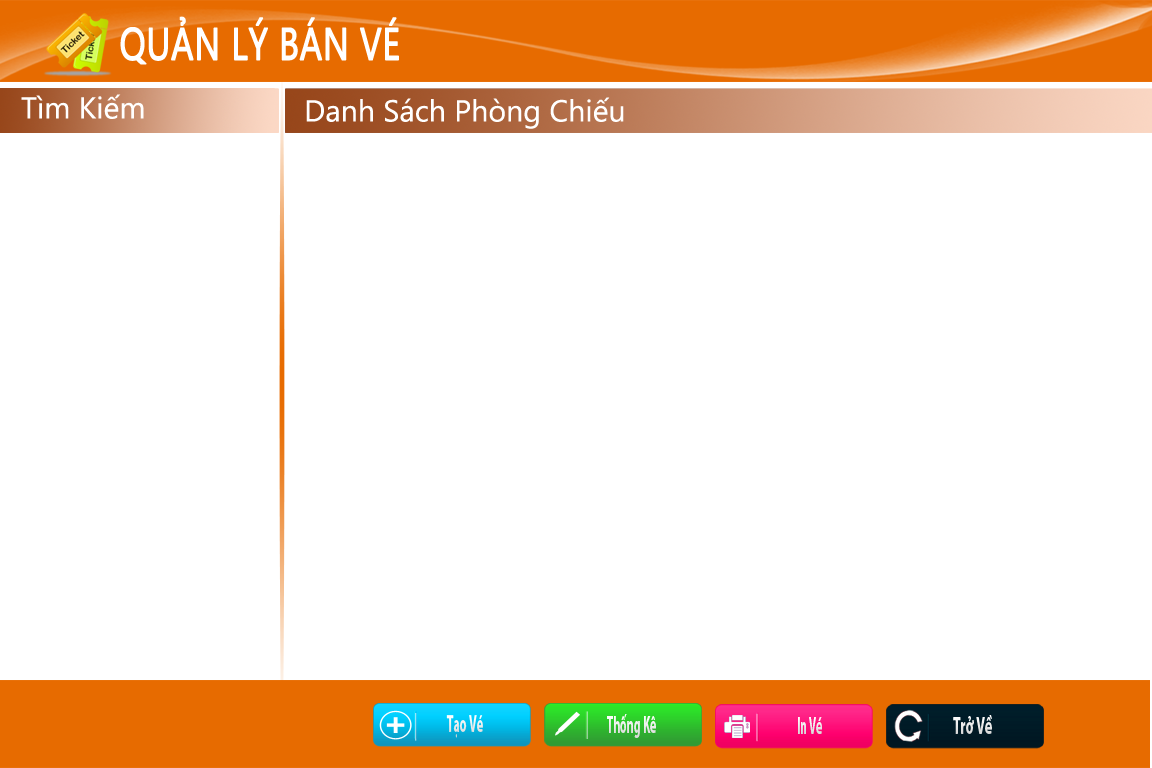
<style>
.page{position:relative;width:1152px;height:768px;background:#ffffff}
.page>*{position:absolute;margin:0}
.t1{font:45px "SegoeUI";color:#ffffff;text-transform:uppercase;font-weight:bold;scale:0.77 1}
.t2{font:30.3px "SegoeUI";color:#ffffff}
.t3{font:23.9px "MyriadPro-Bold";color:#ffffff;scale:0.5 1}
.t4{font:23.9px "MyriadPro-Bold";color:#ffffff;scale:0.49 1}
.t5{font:23.9px "MyriadPro-Bold";color:#e7e7e7;scale:0.47 1}
.t6{font:24.2px "MyriadPro-Bold";color:#e9e9e9;scale:0.57 1}
</style>
<div class="page">
<p class="t1" style="left:120px;top:16px;width:279px;height:49px">QUẢN LÝ BÁN VÉ</p>
<p class="t2" style="left:21px;top:94px;width:123px;height:25px">Tìm Kiếm</p>
<p class="t2" style="left:306px;top:97px;width:318px;height:32px">Danh Sách Phòng Chiếu</p>
<p class="t3" style="left:446px;top:715px;width:37px;height:23px">Tạo Vé</p>
<p class="t4" style="left:607px;top:714px;width:49px;height:24px">Thống Kê</p>
<p class="t5" style="left:798px;top:717px;width:24px;height:17px">In Vé</p>
<p class="t6" style="left:953px;top:715px;width:39px;height:19px">Trở Về</p>
</div>
